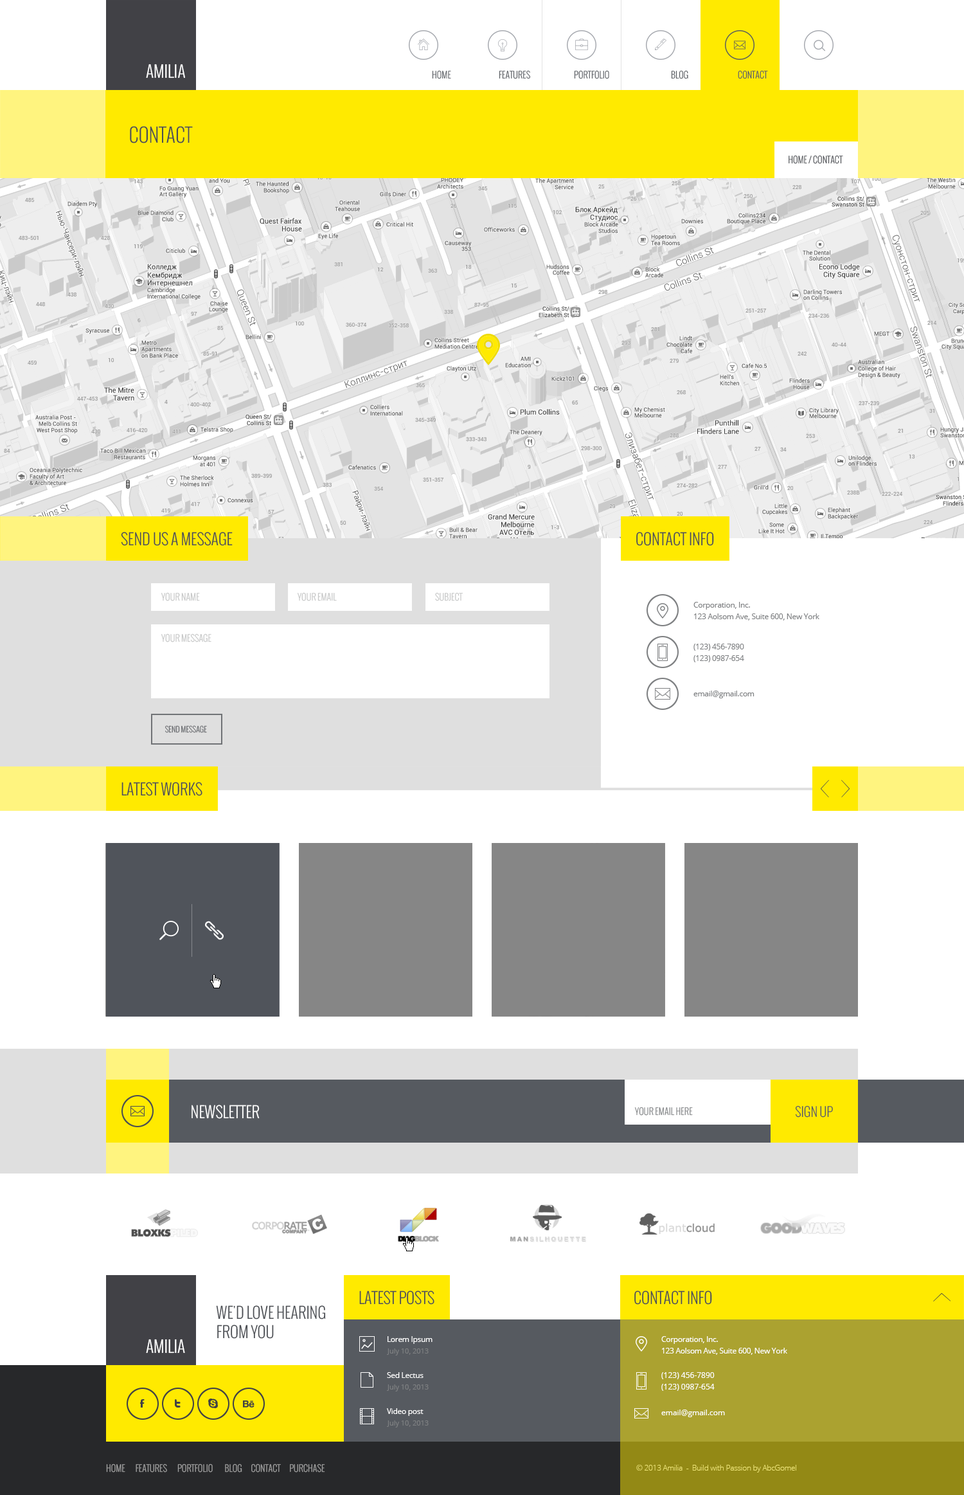
<style>
.page{position:relative;width:964px;height:1495px;background:#ffffff}
.page>*{position:absolute;margin:0}
.t1{font:16.1px "Oswald-Light";color:#ffffff;text-transform:uppercase}
.t2{font:9px "Oswald-Light";color:#565a60;text-transform:uppercase}
.t3{font:19.3px "Oswald-Light";color:#4b4e53;text-transform:uppercase}
.t4{font:9px "Oswald-Light";color:#4b4e53;text-transform:uppercase}
.t5{font:15.4px "Oswald-Light";color:#4b4e53;text-transform:uppercase}
.t6{font:9px "Oswald-Light";color:#c4c5c5;text-transform:uppercase}
.t7{font:7.7px/11.6px "OpenSans";letter-spacing:-0.025em;color:#7e8082}
.t8{font:7.7px "OpenSans";letter-spacing:-0.025em;color:#7e8082}
.t9{font:7.7px "Oswald-Light";color:#707276}
.t10{font:15.4px "Oswald-Light";color:#ffffff}
.t11{font:9px "Oswald-Light";letter-spacing:0.005em;color:#7e8082;text-transform:uppercase}
.t12{font:12.9px "Oswald-Light";color:#565a60}
.t13{font:15.4px "Oswald-Light";color:#4b4e53}
.t14{font:15.4px/19.3px "Oswald-Light";color:#4b4e53;text-transform:uppercase}
.t15{font:7.7px/11.6px "OpenSans";letter-spacing:-0.025em;color:#ffffff}
.t16{font:7.1px "OpenSans";color:#7e8082}
.t17{font:7.7px "OpenSans";letter-spacing:-0.025em;color:#ffffff}
.t18{font:7.7px/11.6px "OpenSans";color:#ffffff}
.t19{font:7.7px "OpenSans";color:#ffffff}
.t20{font:9px "Oswald-Light";color:#a1a1a1}
.t21{font:7.7px "OpenSans-Light";letter-spacing:-0.025em;color:#eee575}
</style>
<div class="page">
<p class="t1" style="left:146px;top:64px;width:39px;height:14px">AMILIA</p>
<p class="t2" style="left:432px;top:70px;width:19px;height:9px">Home</p>
<p class="t2" style="left:499px;top:70px;width:32px;height:9px">features</p>
<p class="t2" style="left:574px;top:70px;width:35px;height:9px">PORTFOLIO</p>
<p class="t2" style="left:671px;top:70px;width:17px;height:9px">BLOG</p>
<p class="t2" style="left:738px;top:70px;width:30px;height:9px">CONTACT</p>
<p class="t3" style="left:130px;top:126px;width:63px;height:17px">CONTACT</p>
<p class="t4" style="left:789px;top:155px;width:54px;height:9px">home / contact</p>
<p class="t5" style="left:121px;top:532px;width:112px;height:14px">Send us a message</p>
<p class="t5" style="left:636px;top:532px;width:78px;height:14px">Contact info</p>
<p class="t6" style="left:161px;top:592px;width:39px;height:9px">Your name</p>
<p class="t6" style="left:297px;top:592px;width:40px;height:9px">Your email</p>
<p class="t6" style="left:435px;top:592px;width:29px;height:9px">Subject</p>
<p class="t7" style="left:694px;top:602px;width:126px;height:18px">Corporation, Inc.<br>123 Aolsom Ave, Suite 600, New York</p>
<p class="t6" style="left:161px;top:633px;width:51px;height:9px">Your message</p>
<p class="t7" style="left:694px;top:644px;width:50px;height:18px">(123) 456-7890<br>(123) 0987-654</p>
<p class="t8" style="left:694px;top:690px;width:61px;height:8px">email@gmail.com</p>
<p class="t9" style="left:165px;top:725px;width:42px;height:8px">SEND MESSAGE</p>
<p class="t5" style="left:122px;top:782px;width:81px;height:14px">latest Works</p>
<p class="t10" style="left:192px;top:1104px;width:68px;height:15px">NEWSLETTER</p>
<p class="t11" style="left:634px;top:1106px;width:59px;height:9px">Your email here</p>
<p class="t12" style="left:795px;top:1105px;width:38px;height:12px">SIGN UP</p>
<p class="t13" style="left:359px;top:1290px;width:76px;height:14px">LATEST POSTS</p>
<p class="t13" style="left:634px;top:1290px;width:78px;height:14px">CONTACT INFO</p>
<p class="t14" style="left:216px;top:1305px;width:110px;height:33px">we'd love hearing <br>from you</p>
<p class="t15" style="left:388px;top:1336px;width:45px;height:8px">Lorem Ipsum<br>ipsumage post</p>
<p class="t15" style="left:662px;top:1336px;width:126px;height:18px">Corporation, Inc.<br>123 Aolsom Ave, Suite 600, New York</p>
<p class="t1" style="left:146px;top:1338px;width:39px;height:15px">AMILIA</p>
<p class="t16" style="left:387px;top:1348px;width:42px;height:7px">July 10, 2013</p>
<p class="t17" style="left:387px;top:1372px;width:37px;height:6px">Sed Lectus</p>
<p class="t18" style="left:662px;top:1372px;width:53px;height:18px">(123) 456-7890<br>(123) 0987-654</p>
<p class="t16" style="left:387px;top:1384px;width:42px;height:7px">July 10, 2013</p>
<p class="t17" style="left:387px;top:1408px;width:37px;height:8px">Video post</p>
<p class="t19" style="left:662px;top:1409px;width:63px;height:8px">email@gmail.com</p>
<p class="t16" style="left:387px;top:1420px;width:42px;height:7px">July 10, 2013</p>
<p class="t20" style="left:106px;top:1463px;width:219px;height:9px">HOME       FEATURES       PORTFOLIO        BLOG      CONTACT      PURCHASE</p>
<p class="t21" style="left:636px;top:1464px;width:161px;height:8px">© 2013 Amilia  -  Build with Passion by AbcGomel</p>
</div>
